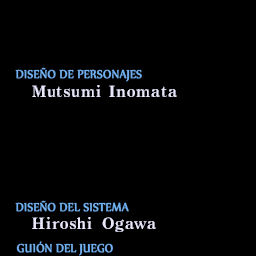
<style>
.page{position:relative;width:256px;height:256px;background:#000000}
.page>*{position:absolute;margin:0}
.t1{font:14px "Nyala-Regular";color:#70b0f0;font-weight:bold;scale:0.9 1}
</style>
<div class="page">
<p class="t1" style="left:15px;top:67px;width:127px;height:15px">DISEÑO DE PERSONAJES</p>
<p class="t1" style="left:15px;top:200px;width:114px;height:12px">DISEÑO DEL SISTEMA</p>
<p class="t1" style="left:16px;top:241px;width:97px;height:15px">GUIÓN DEL JUEGO</p>
</div>
